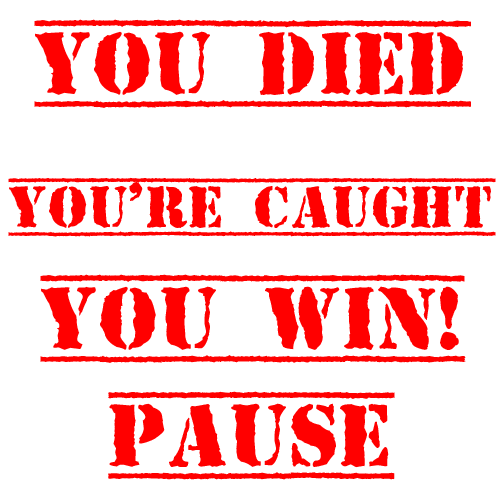
<style>
.page{position:relative;width:500px;height:500px;background:#ffffff}
.page>*{position:absolute;margin:0}
.t1{font:90.3px "TopSecret";color:#ff0000}
.t2{font:59.9px "TopSecret";color:#ff0000}
</style>
<div class="page">
<p class="t1" style="left:34px;top:19px;width:437px;height:89px">YOU DIED</p>
<p class="t2" style="left:8px;top:177px;width:488px;height:60px">You’re Caught</p>
<p class="t1" style="left:40px;top:274px;width:426px;height:89px">YOU Win!</p>
<p class="t1" style="left:108px;top:391px;width:287px;height:89px">Pause</p>
</div>
